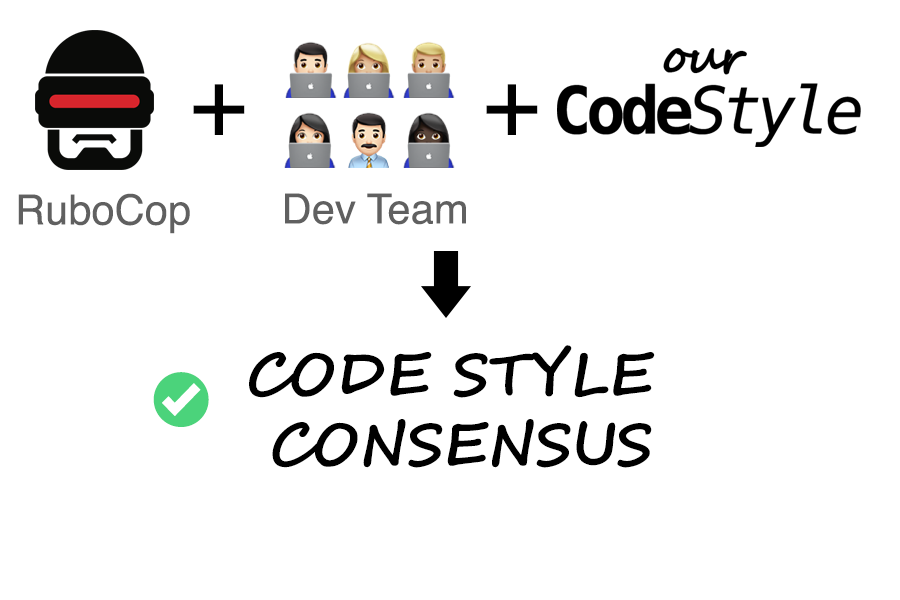
<style>
.page{position:relative;width:900px;height:600px;background:#ffffff}
.page>*{position:absolute;margin:0}
.t1{font:100px "Helvetica";color:#000000}
.t2{font:41.7px "Helvetica";color:#606060}
.t3{font:58.3px "SegoeScript-Bold";color:#000000}
</style>
<div class="page">
<p class="t1" style="left:193px;top:84px;width:52px;height:51px">+</p>
<p class="t1" style="left:486px;top:84px;width:52px;height:51px">+</p>
<p class="t2" style="left:18px;top:193px;width:172px;height:41px">RuboCop</p>
<p class="t2" style="left:285px;top:193px;width:181px;height:32px">Dev Team</p>
<p class="t3" style="left:249px;top:345px;width:406px;height:123px;text-align:center">CODE STYLE <br>CONSENSUS</p>
</div>
